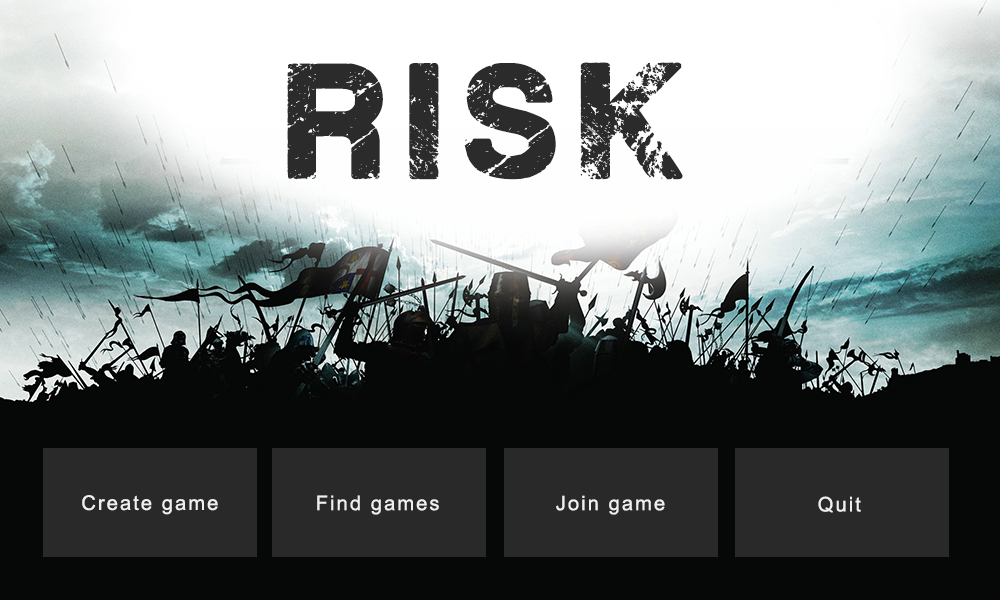
<style>
.page{position:relative;width:1000px;height:600px;background:#060807}
.page>*{position:absolute;margin:0}
.t1{font:132px "PlaneCrash";letter-spacing:0.1em;color:#2b2b2b}
.t2{font:20.2px "ArialMT";letter-spacing:0.1em;color:#efefef}
</style>
<div class="page">
<p class="t1" style="left:287px;top:62px;width:396px;height:118px">risk</p>
<p class="t2" style="left:82px;top:495px;width:136px;height:20px">Create game</p>
<p class="t2" style="left:317px;top:495px;width:122px;height:20px">Find games</p>
<p class="t2" style="left:556px;top:495px;width:109px;height:20px">Join game</p>
<p class="t2" style="left:818px;top:496px;width:43px;height:17px">Quit</p>
</div>
